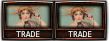
<style>
.page{position:relative;width:110px;height:41px}
.page>*{position:absolute;margin:0}
.t1{font:9px "Consolas";color:#ffffff;scale:0.97 1}
</style>
<div class="page">
<p class="t1" style="left:16px;top:31px;width:24px;height:6px">TRADE</p>
<p class="t1" style="left:68px;top:31px;width:24px;height:6px">TRADE</p>
</div>
